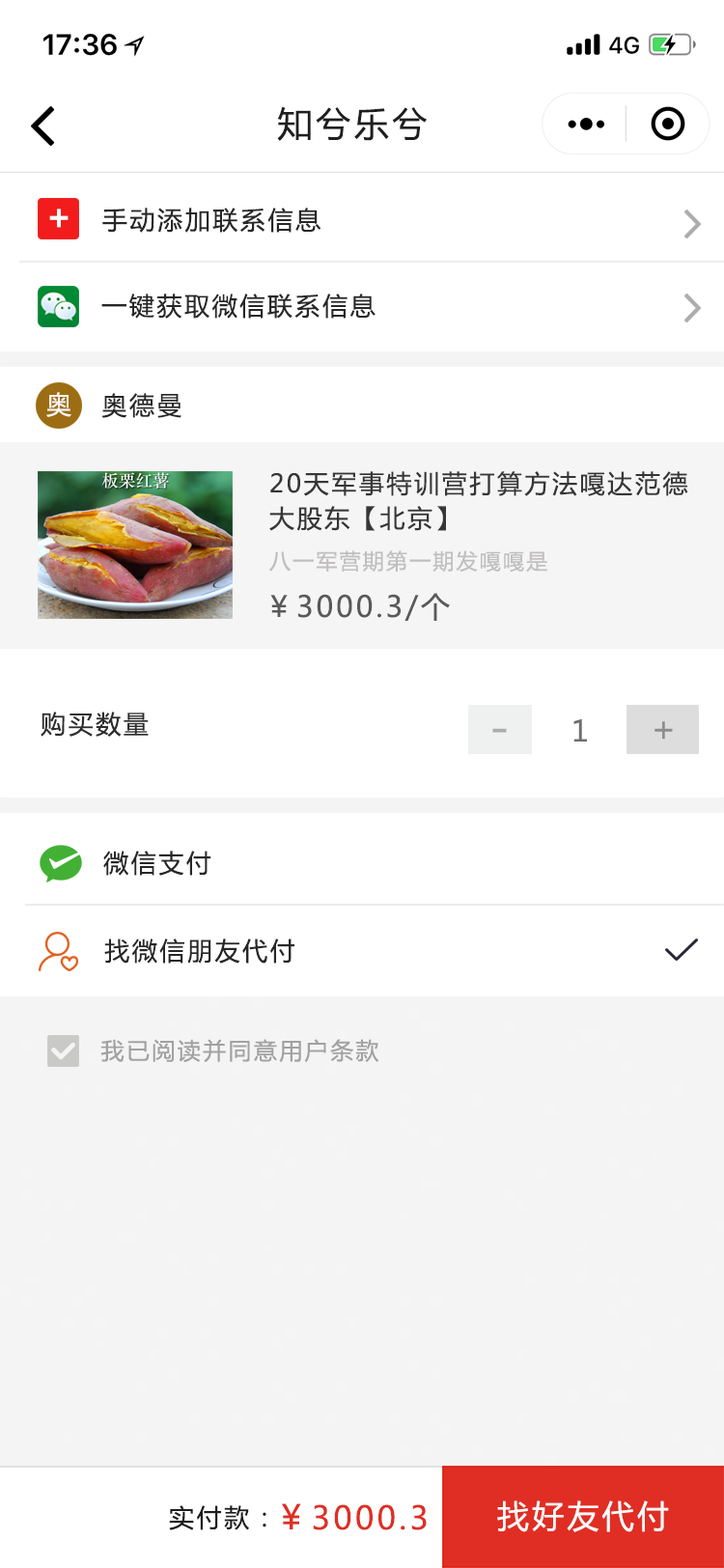
<style>
.page{position:relative;width:724px;height:1568px;background:#ffffff}
.page>*{position:absolute;margin:0}
.t1{font:34.8px "MicrosoftYaHei";letter-spacing:0.1em;color:#201f20}
.t2{font:34.8px "MicrosoftYaHei-Bold";letter-spacing:0.1em;color:#fcfbfb}
.t3{font:25.1px "MicrosoftYaHei";letter-spacing:0.1em;color:#282727}
.t4{font:25.1px "MicrosoftYaHei";letter-spacing:0.1em;color:#f9f7f2}
.t5{font:25.1px/34.8px "MicrosoftYaHei";letter-spacing:0.1em;color:#373636}
.t6{font:21.2px "MicrosoftYaHei";letter-spacing:0.1em;color:#c0bebe}
.t7{font:29px "MicrosoftYaHei";letter-spacing:0.1em;color:#595959}
.t8{font:25.1px "MicrosoftYaHei";letter-spacing:0.1em;color:#2f2e2e}
.t9{font:29px "MicrosoftYaHei";letter-spacing:0.1em;color:#6f6d6d}
.t10{font:34.8px "MicrosoftYaHei";letter-spacing:0.1em;color:#8e8d8d}
.t11{font:46.3px "MicrosoftYaHei";letter-spacing:0.1em;color:#acacac}
.t12{font:23.2px "MicrosoftYaHei";letter-spacing:0.1em;color:#a1a1a1}
.t13{font:25.1px "MicrosoftYaHei";letter-spacing:0.1em;color:#1e1d1d}
.t14{font:31.9px "MicrosoftYaHei";letter-spacing:0.1em;color:#e02e24}
.t15{font:33.8px "MicrosoftYaHei";letter-spacing:0.1em;color:#e02e24}
.t16{font:31.9px "MicrosoftYaHei";letter-spacing:0.1em;color:#fdfbfb}
</style>
<div class="page">
<p class="t1" style="left:277px;top:106px;width:150px;height:35px">知兮乐兮</p>
<p class="t2" style="left:49px;top:209px;width:20px;height:19px">+</p>
<p class="t3" style="left:102px;top:208px;width:220px;height:25px">手动添加联系信息</p>
<p class="t3" style="left:101px;top:294px;width:275px;height:25px">一键获取微信联系信息</p>
<p class="t4" style="left:46px;top:392px;width:25px;height:25px">奥</p>
<p class="t3" style="left:101px;top:393px;width:81px;height:25px">奥德曼</p>
<p class="t5" style="left:269px;top:471px;width:419px;height:60px">20天军事特训营打算方法嘎达范德<br>大股东【北京】</p>
<p class="t6" style="left:269px;top:550px;width:279px;height:23px">八一军营期第一期发嘎嘎是</p>
<p class="t7" style="left:270px;top:593px;width:180px;height:28px">￥3000.3/个</p>
<p class="t8" style="left:41px;top:712px;width:108px;height:25px">购买数量</p>
<p class="t9" style="left:574px;top:718px;width:13px;height:24px">1</p>
<p class="t10" style="left:655px;top:721px;width:18px;height:19px">+</p>
<p class="t11" style="left:492px;top:728px;width:15px;height:5px">-</p>
<p class="t3" style="left:103px;top:851px;width:108px;height:25px">微信支付</p>
<p class="t3" style="left:104px;top:938px;width:190px;height:26px">找微信朋友代付</p>
<p class="t12" style="left:100px;top:1039px;width:279px;height:24px">我已阅读并同意用户条款</p>
<p class="t13" style="left:169px;top:1505px;width:97px;height:25px">实付款：</p>
<p class="t14" style="left:282px;top:1503px;width:145px;height:27px"><span class="t15">￥</span>3000.3</p>
<p class="t16" style="left:497px;top:1500px;width:172px;height:32px">找好友代付</p>
</div>
